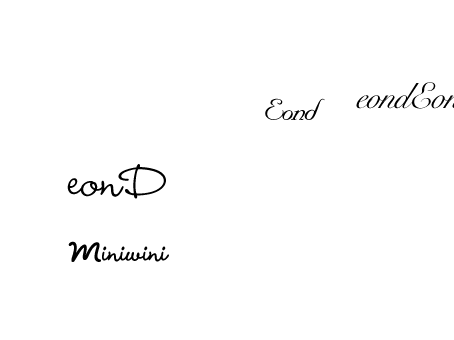
<style>
.page{position:relative;width:454px;height:340px;background:#ffffff}
.page>*{position:absolute;margin:0}
.t1{font:36px "NuptialScript";letter-spacing:-0.05em;color:#000000}
.t2{font:60px "WendyLP-Medium";color:#000000}
.t3{font:36px "WendyLP-Bold";color:#000000}
.t4{font:36px "WendyLP-Bold";color:#000000;font-weight:bold}
</style>
<div class="page">
<p class="t1" style="left:265px;top:98px;width:60px;height:22px">Eond</p>
<p class="t2" style="left:67px;top:164px;width:99px;height:35px">eonD</p>
<p class="t3" style="left:68px;top:241px;width:101px;height:21px"><span class="t4">M</span>iniwini</p>
</div>
